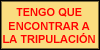
<style>
.page{position:relative;width:100px;height:50px;background:#fadc7f}
.page>*{position:absolute;margin:0}
.t1{font:11px "Arial-BoldMT";color:#ff0000}
</style>
<div class="page">
<p class="t1" style="left:3px;top:8px;width:92px;height:35px;text-align:center">TENGO QUE<br>ENCONTRAR A<br>LA TRIPULACIÓN</p>
</div>
